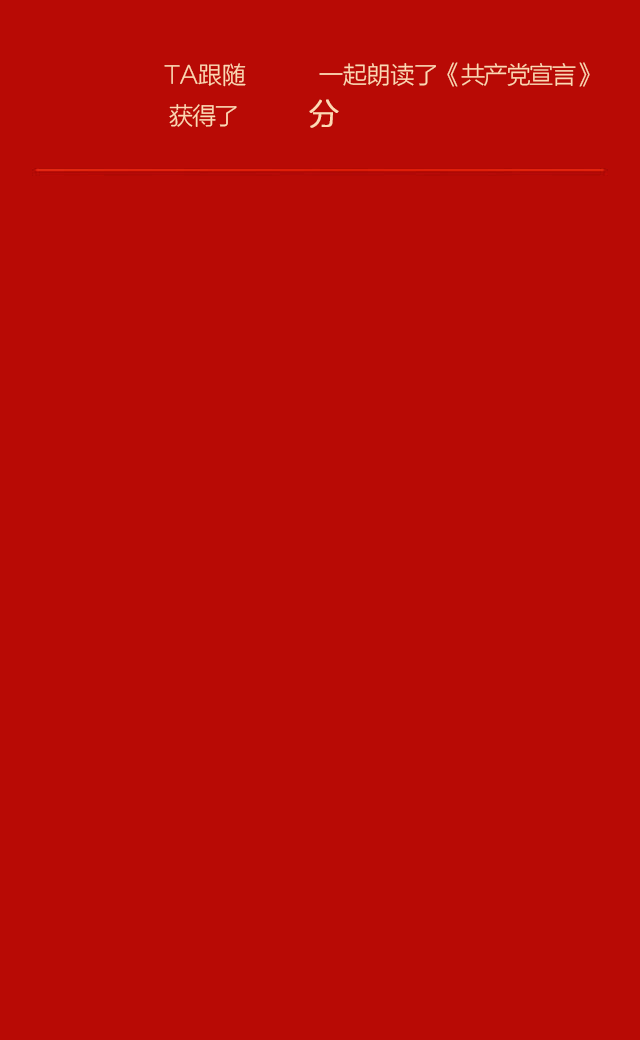
<style>
.page{position:relative;width:640px;height:1040px;background:#b80a05}
.page>*{position:absolute;margin:0}
.t1{font:24px "FZLTXHJW--GB1-0";letter-spacing:-0.05em;color:#ffd9b4;text-transform:uppercase}
.t2{font:24px "FZLTXHJW--GB1-0";color:#ffd9b4;text-transform:uppercase}
.t3{font:24px "FZLTXHJW--GB1-0";letter-spacing:-0.01em;color:#ffd9b4;text-transform:uppercase}
.t4{font:30px "FZLTXHJW--GB1-0";letter-spacing:-0.05em;color:#ffd9b4;text-transform:uppercase;font-weight:bold}
</style>
<div class="page">
<p class="t1" style="left:164px;top:62px;width:426px;height:25px"><span class="t2">TA跟随           </span><span class="t3">一起朗读了</span>《共产党宣言》</p>
<p class="t1" style="left:169px;top:99px;width:170px;height:29px">获得了             <span class="t4">分</span></p>
</div>
